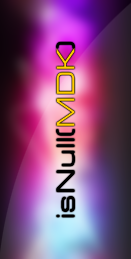
<style>
.page{position:relative;width:131px;height:259px}
.page>*{position:absolute;margin:0}
.t1{font:24px "Square721BT-RomanExtended";color:#000000}
.t2{font:24px "Square721BT-RomanExtended";color:#ffcc00}
</style>
<div class="page">
<p class="t1" style="left:56px;top:42px;width:19px;height:176px;rotate:-90deg">isNull(<span class="t2">MDK</span>)</p>
</div>
